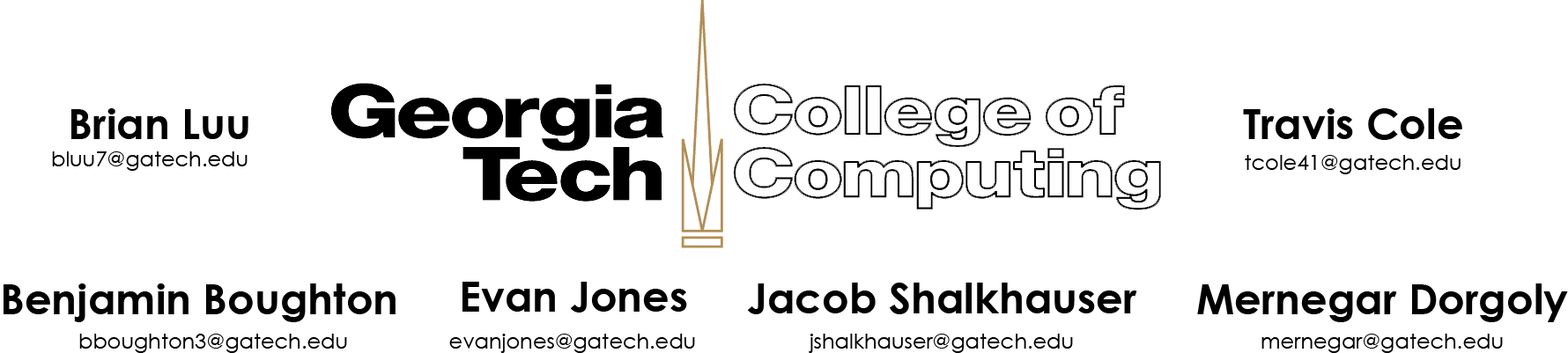
<style>
.page{position:relative;width:1568px;height:353px;background:#ffffff}
.page>*{position:absolute;margin:0}
.t1{font:42.3px "CenturyGothic-Bold";color:#000000}
.t2{font:21.1px "CenturyGothic";color:#000000}
</style>
<div class="page">
<p class="t1" style="left:71px;top:108px;width:177px;height:31px">Brian Luu</p>
<p class="t1" style="left:1243px;top:108px;width:219px;height:32px">Travis Cole</p>
<p class="t2" style="left:52px;top:152px;width:196px;height:19px">bluu7@gatech.edu</p>
<p class="t2" style="left:1245px;top:155px;width:216px;height:19px">tcole41@gatech.edu</p>
<p class="t1" style="left:462px;top:282px;width:225px;height:31px">Evan Jones</p>
<p class="t1" style="left:4px;top:284px;width:392px;height:38px">Benjamin Boughton</p>
<p class="t1" style="left:747px;top:283px;width:390px;height:31px">Jacob Shalkhauser</p>
<p class="t1" style="left:1197px;top:284px;width:371px;height:38px">Mernegar Dorgoly</p>
<p class="t2" style="left:79px;top:334px;width:268px;height:19px">bboughton3@gatech.edu</p>
<p class="t2" style="left:449px;top:334px;width:246px;height:19px">evanjones@gatech.edu</p>
<p class="t2" style="left:809px;top:334px;width:264px;height:19px">jshalkhauser@gatech.edu</p>
<p class="t2" style="left:1261px;top:334px;width:242px;height:19px">mernegar@gatech.edu</p>
</div>
